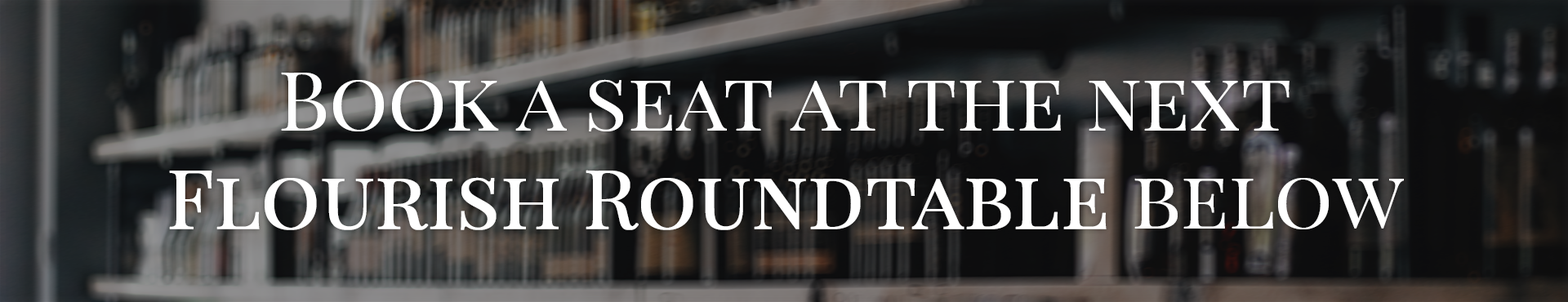
<style>
.page{position:relative;width:1568px;height:302px}
.page>*{position:absolute;margin:0}
.t1{font:81.6px "PlayfairDisplaySC-Regular";color:#ffffff}
.t2{font:81.6px "PlayfairDisplaySC-Regular";color:#ffffff;font-weight:bold}
</style>
<div class="page">
<p class="t1" style="left:169px;top:72px;width:1235px;height:158px;text-align:center">Book a seat at the next <br><span class="t2">Flourish Roundtable </span>below</p>
</div>
